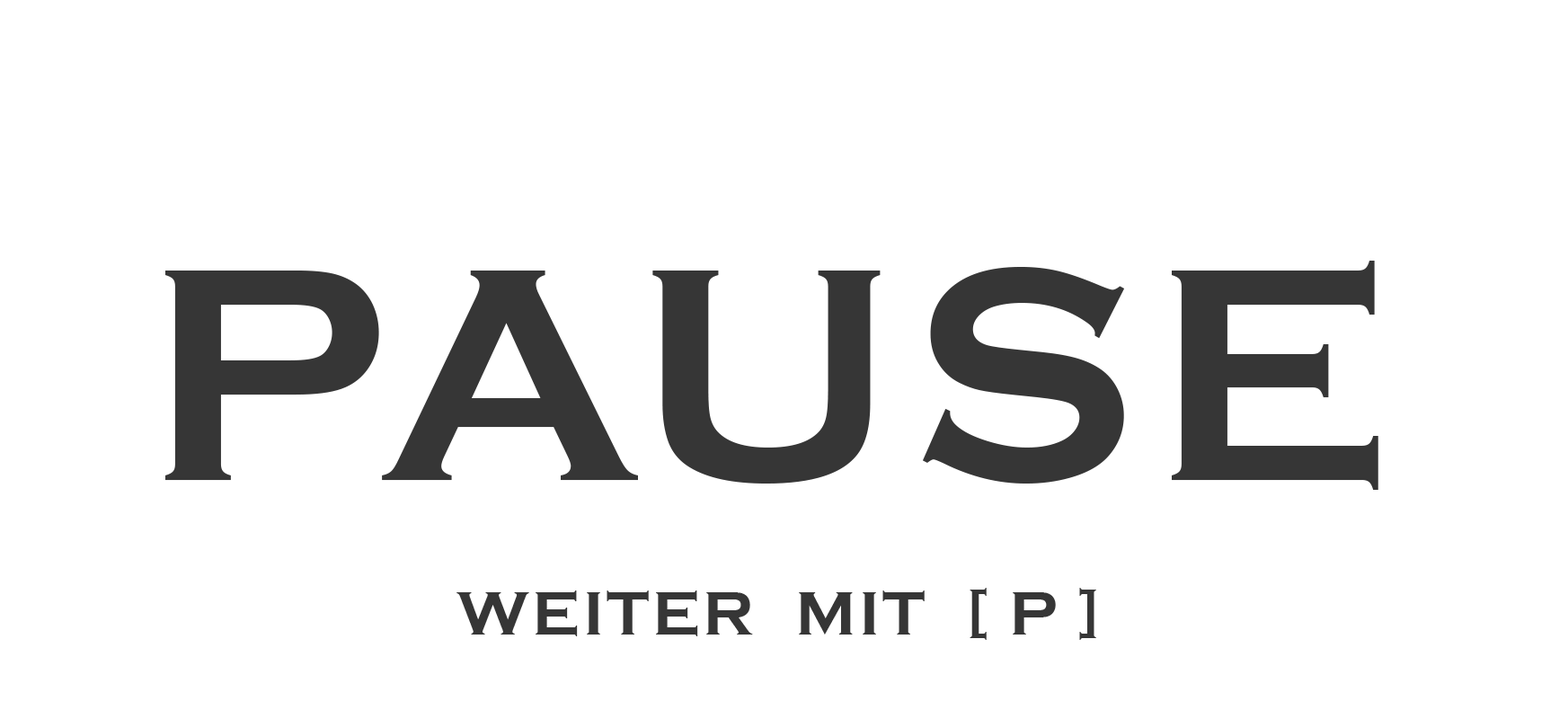
<style>
.page{position:relative;width:1568px;height:719px;background:#ffffff}
.page>*{position:absolute;margin:0}
.t1{font:314.5px "CopperplateGothic-Bold";letter-spacing:0.05em;color:#363636}
.t2{font:62.9px "CopperplateGothic-Bold";letter-spacing:0.05em;color:#363636}
</style>
<div class="page">
<p class="t1" style="left:165px;top:261px;width:1213px;height:229px">PAUSE</p>
<p class="t2" style="left:456px;top:588px;width:640px;height:52px">WEITER  MIT  [ P ]</p>
</div>
